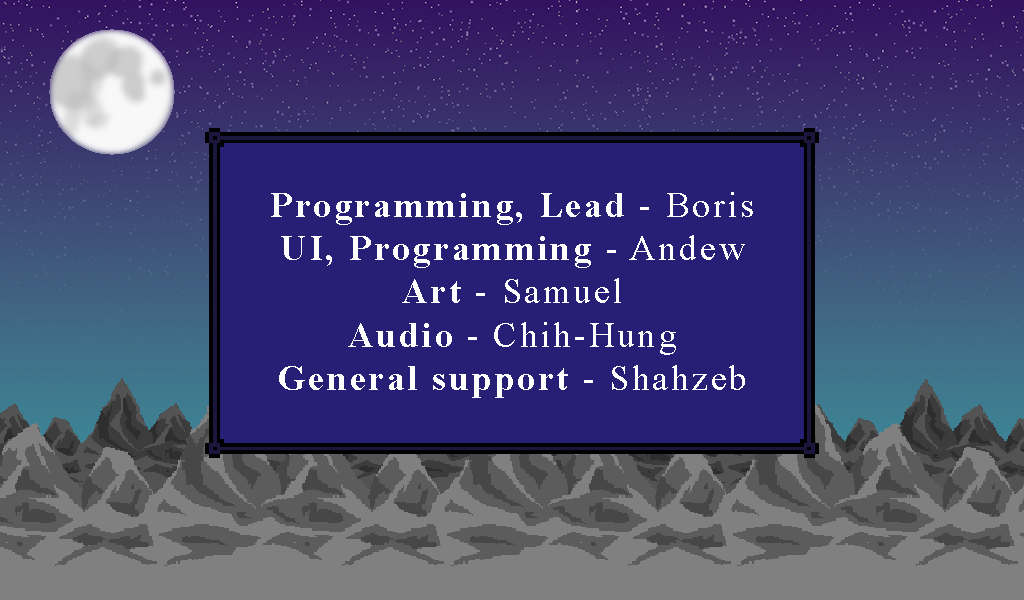
<style>
.page{position:relative;width:1024px;height:600px;background:#271f75}
.page>*{position:absolute;margin:0}
.t1{font:36px "TimesNewRomanPS-BoldMT";letter-spacing:0.075em;color:#ffffff}
.t2{font:36px "TimesNewRomanPSMT";letter-spacing:0.075em;color:#ffffff}
</style>
<div class="page">
<p class="t1" style="left:271px;top:192px;width:482px;height:206px;text-align:center">Programming, Lead<span class="t2"> - Boris<br></span>UI, Programming<span class="t2"> - Andew<br></span>Art <span class="t2">- Samuel<br></span>Audio<span class="t2"> - Chih-Hung<br></span>General support<span class="t2"> - Shahzeb</span></p>
</div>
